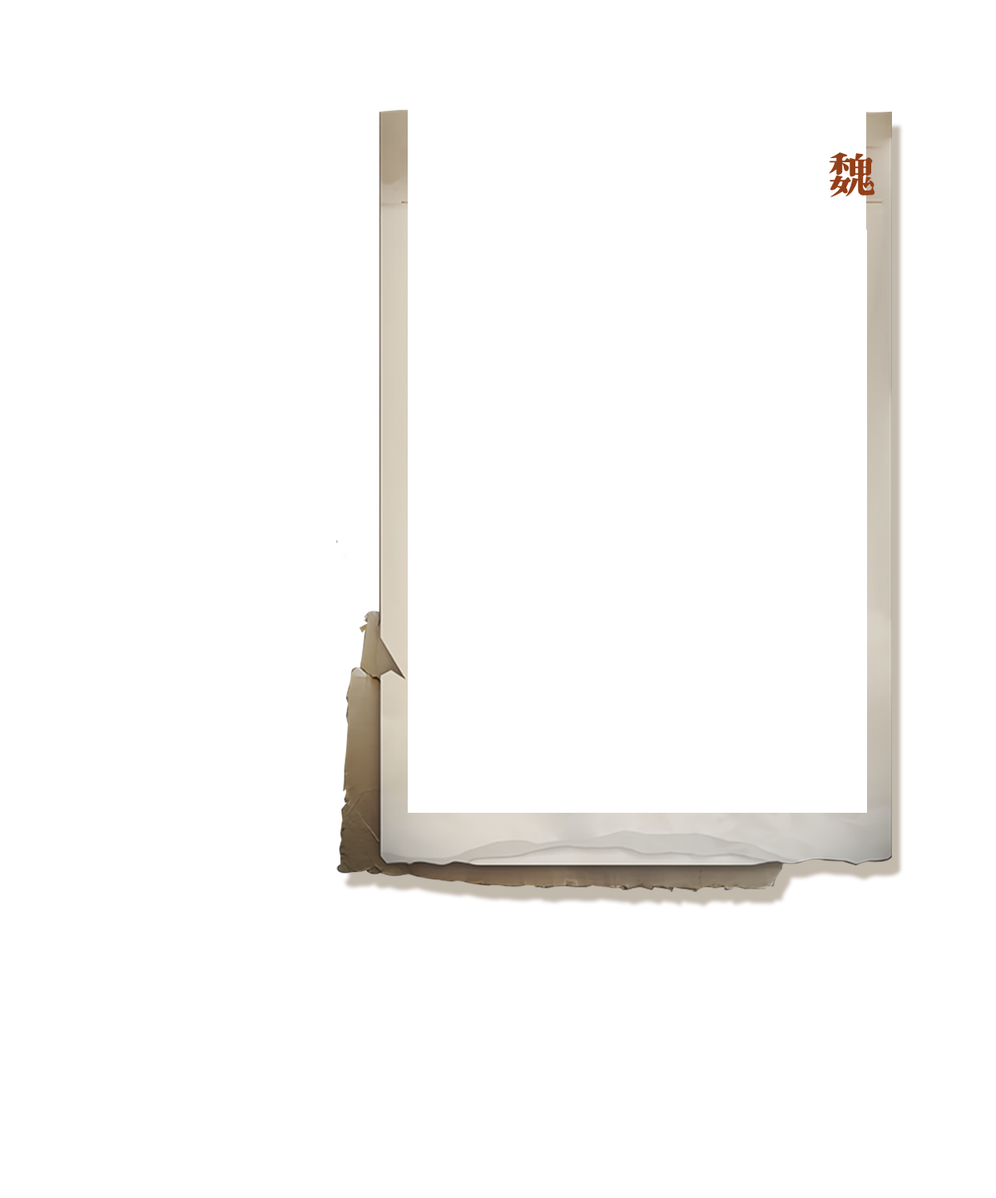
<style>
.page{position:relative;width:996px;height:1198px;background:#ffffff}
.page>*{position:absolute;margin:0}
.t1{font:49.7px "DATM8";letter-spacing:0.02em;color:#933f19}
</style>
<div class="page">
<p class="t1" style="left:828px;top:152px;width:46px;height:45px">魏</p>
</div>
